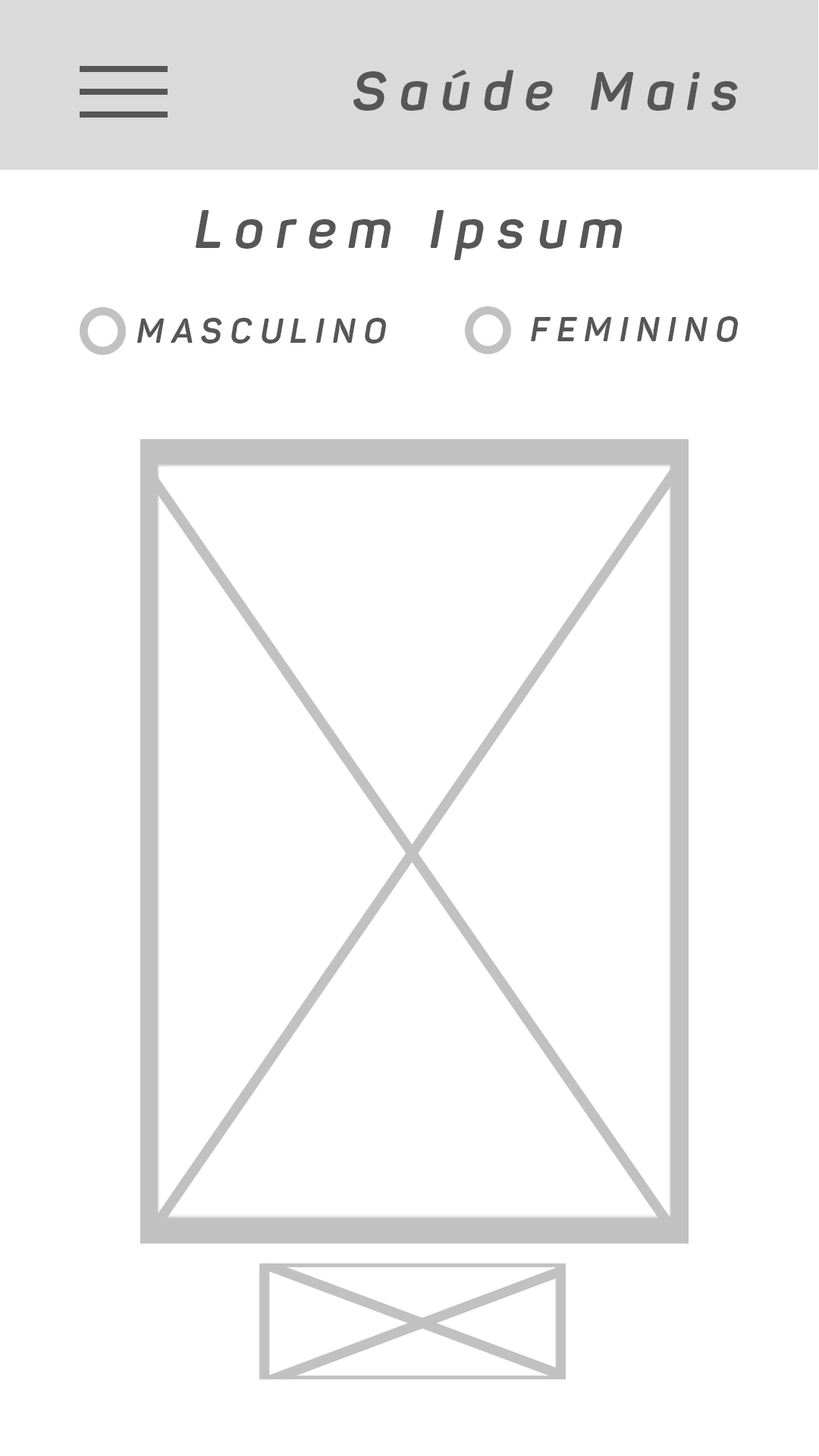
<style>
.page{position:relative;width:819px;height:1456px;background:#ffffff}
.page>*{position:absolute;margin:0}
.t1{font:53.9px "Panton-BoldItalic";letter-spacing:0.23em;color:#565656}
.t2{font:33.7px "Panton-BoldItalic";letter-spacing:0.23em;color:#565656}
</style>
<div class="page">
<p class="t1" style="left:353px;top:70px;width:385px;height:41px">Saúde Mais</p>
<p class="t1" style="left:196px;top:210px;width:426px;height:50px">Lorem Ipsum</p>
<p class="t2" style="left:137px;top:318px;width:249px;height:26px">MASCULINO</p>
<p class="t2" style="left:531px;top:316px;width:207px;height:26px">FEMININO</p>
</div>
